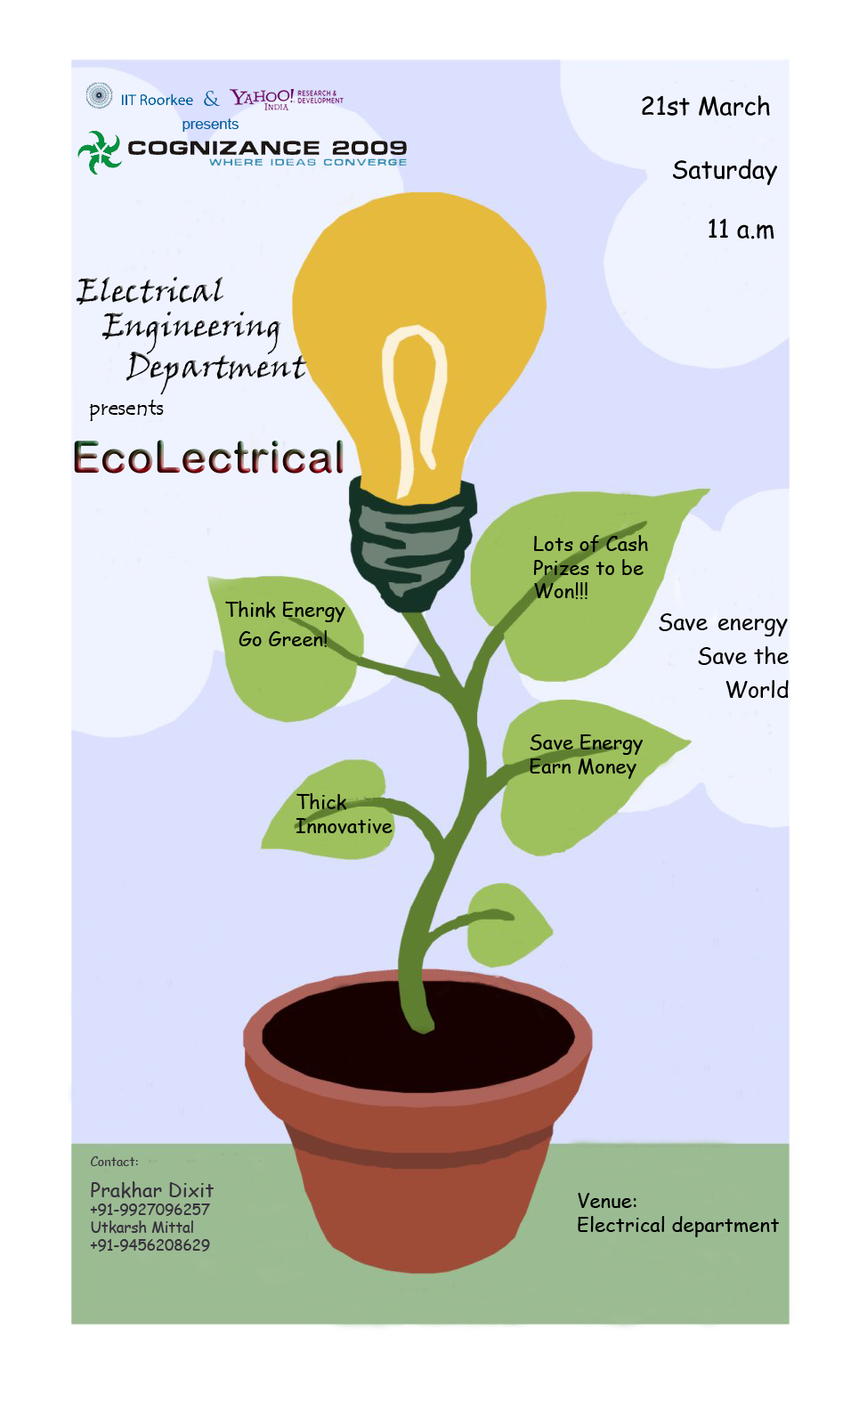
<style>
.page{position:relative;width:851px;height:1402px;background:#ffffff}
.page>*{position:absolute;margin:0}
.t1{font:19.8px "TrajanPro-Regular";color:#045f9f}
.t2{font:24.7px "ComicSansMS";color:#000000}
.t3{font:14.8px "ArialMT";color:#045f9f}
.t4{font:32.1px "VinerHandITC";color:#000000}
.t5{font:22.2px "TempusSansITC";color:#000000}
.t6{font:44.5px "ArialRoundedMTBold"}
.t7{font:19.8px "ComicSansMS";color:#000000}
.t8{font:22.2px "ComicSansMS";color:#000000}
.t9{font:12.4px "ComicSansMS";color:#37313d}
.t10{font:14.8px "ComicSansMS";color:#37313d}
.t11{font:19.8px "ComicSansMS";color:#37313d}
</style>
<div class="page">
<p class="t1" style="left:204px;top:91px;width:17px;height:15px">&amp;</p>
<p class="t2" style="left:642px;top:95px;width:128px;height:21px">21st March</p>
<p class="t3" style="left:182px;top:118px;width:56px;height:14px">presents</p>
<p class="t2" style="left:673px;top:158px;width:104px;height:27px">Saturday</p>
<p class="t2" style="left:708px;top:218px;width:66px;height:21px">11 a.m</p>
<p class="t4" style="left:76px;top:276px;width:147px;height:29px">Electrical</p>
<p class="t4" style="left:101px;top:311px;width:180px;height:43px">Engineering</p>
<p class="t4" style="left:126px;top:352px;width:181px;height:43px">Department</p>
<p class="t5" style="left:89px;top:400px;width:75px;height:21px">presents</p>
<p class="t6" style="left:74px;top:440px;width:270px;height:33px">EcoLectrical</p>
<p class="t7" style="left:533px;top:535px;width:115px;height:64px">Lots of Cash<br>Prizes to be<br>Won!!!</p>
<p class="t7" style="left:225px;top:601px;width:120px;height:21px">Think Energy</p>
<p class="t8" style="left:659px;top:613px;width:48px;height:18px">Save</p>
<p class="t8" style="left:718px;top:618px;width:70px;height:18px">energy</p>
<p class="t7" style="left:238px;top:630px;width:89px;height:17px">Go Green!</p>
<p class="t8" style="left:698px;top:646px;width:90px;height:19px">Save the</p>
<p class="t8" style="left:725px;top:680px;width:63px;height:18px">World</p>
<p class="t7" style="left:529px;top:734px;width:114px;height:45px">Save Energy<br>Earn Money</p>
<p class="t7" style="left:295px;top:793px;width:97px;height:41px">Thick <br>Innovative</p>
<p class="t9" style="left:91px;top:1156px;width:47px;height:10px">Contact:</p>
<p class="t10" style="left:90px;top:1181px;width:124px;height:70px"><span class="t11">Prakhar Dixit<br></span>+91-9927096257<br>Utkarsh Mittal<br>+91-9456208629</p>
<p class="t7" style="left:578px;top:1192px;width:201px;height:45px">Venue:<br>Electrical department</p>
</div>
